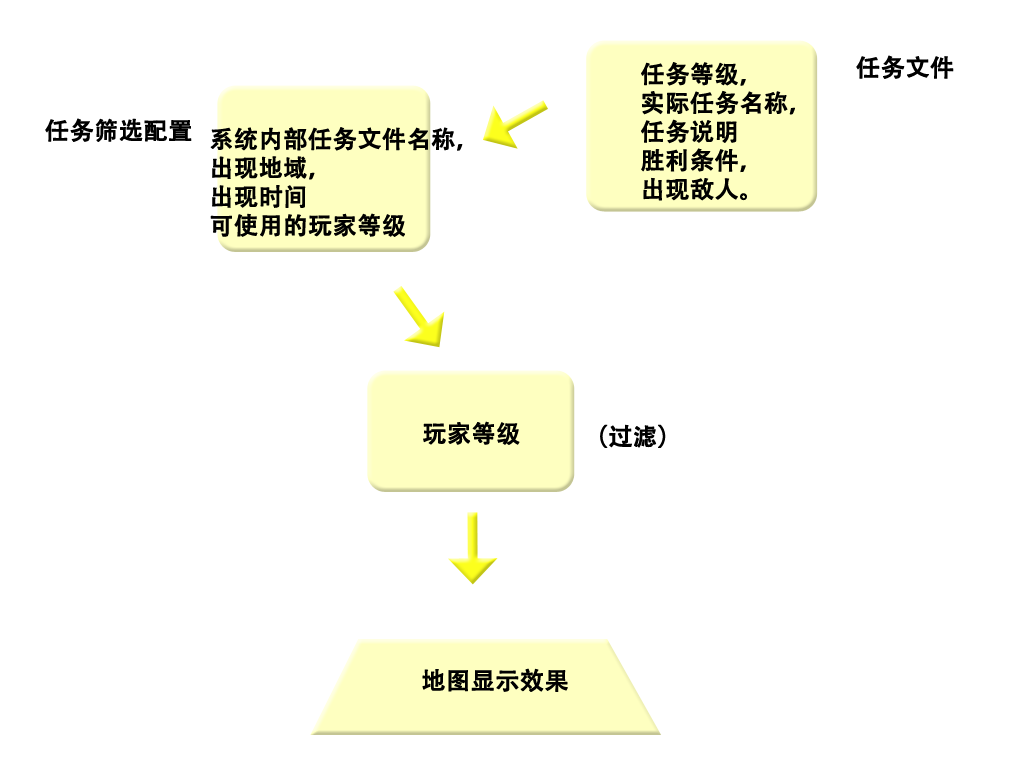
<style>
.page{position:relative;width:1024px;height:768px;background:#ffffff}
.page>*{position:absolute;margin:0}
.t1{font:24px "AdobeHeitiStd-Regular";color:#000000;font-weight:bold}
</style>
<div class="page">
<p class="t1" style="left:641px;top:62px;width:154px;height:139px">任务等级，<br>实际任务名称，<br>任务说明<br>胜利条件，<br>出现敌人。</p>
<p class="t1" style="left:856px;top:55px;width:98px;height:24px">任务文件</p>
<p class="t1" style="left:45px;top:118px;width:147px;height:24px">任务筛选配置</p>
<p class="t1" style="left:210px;top:127px;width:253px;height:110px">系统内部任务文件名称，<br>出现地域，<br>出现时间<br>可使用的玩家等级</p>
<p class="t1" style="left:423px;top:421px;width:97px;height:24px">玩家等级</p>
<p class="t1" style="left:600px;top:424px;width:66px;height:24px">（过滤）</p>
<p class="t1" style="left:422px;top:668px;width:146px;height:24px">地图显示效果</p>
</div>
